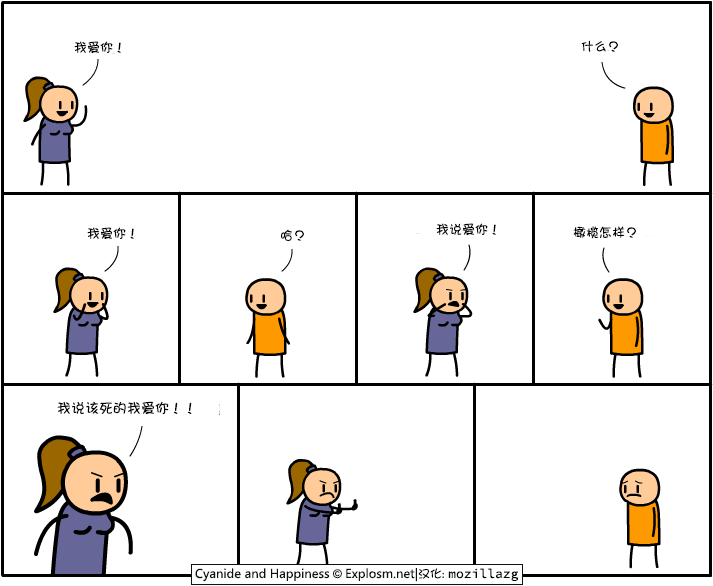
<style>
.page{position:relative;width:713px;height:586px;background:#ffffff}
.page>*{position:absolute;margin:0}
.t1{font:13px "DFGirl";color:#000000}
.t2{font:14px "DFGirl";color:#000000}
</style>
<div class="page">
<p class="t1" style="left:74px;top:41px;width:47px;height:13px">我爱你！</p>
<p class="t1" style="left:581px;top:40px;width:37px;height:12px">什么？</p>
<p class="t1" style="left:87px;top:227px;width:47px;height:13px">我爱你！</p>
<p class="t1" style="left:281px;top:229px;width:23px;height:12px">哈？</p>
<p class="t1" style="left:436px;top:223px;width:60px;height:13px">我说爱你！</p>
<p class="t1" style="left:573px;top:226px;width:63px;height:13px">橄榄怎样？</p>
<p class="t2" style="left:57px;top:401px;width:135px;height:14px">我说该死的我爱你！！</p>
</div>
